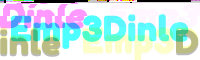
<style>
.page{position:relative;width:200px;height:60px;background:#ffffff}
.page>*{position:absolute;margin:0}
.t1{font:33.3px "FredokaOne-Regular";font-weight:bold}
</style>
<div class="page">
<p class="t1" style="left:11px;top:14px;width:178px;height:35px">Emp3Dinle</p>
</div>
